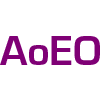
<style>
.page{position:relative;width:100px;height:100px;background:#ffffff}
.page>*{position:absolute;margin:0}
.t1{font:43px "Eurostile-Bol";color:#7f0075}
</style>
<div class="page">
<p class="t1" style="left:0px;top:36px;width:100px;height:29px">AoEO</p>
</div>
